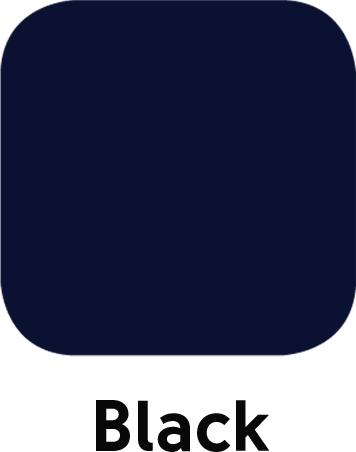
<style>
.page{position:relative;width:356px;height:452px;background:#0b1131}
.page>*{position:absolute;margin:0}
.t1{font:72px "Solomon-Sans-Bold";color:#080808}
</style>
<div class="page">
<p class="t1" style="left:96px;top:400px;width:173px;height:52px">Black</p>
</div>
